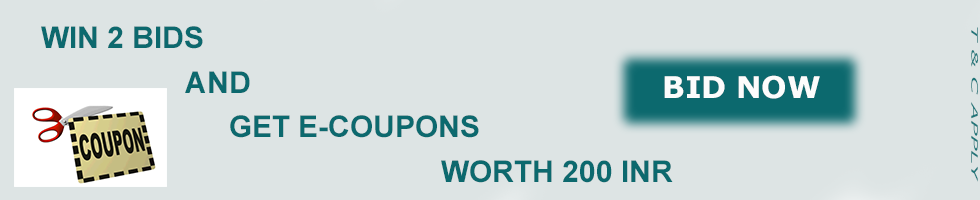
<style>
.page{position:relative;width:980px;height:200px;background:#dde4e4}
.page>*{position:absolute;margin:0}
.t1{font:30px/14.9px "Arial-BoldMT";color:#0c696e}
.t2{font:25.1px/18.7px "Verdana-Italic";color:#21767a;scale:0.36 1}
.t3{font:30px "Verdana-Bold";color:#fcfcfc}
</style>
<div class="page">
<p class="t1" style="left:41px;top:26px;width:632px;height:157px">WIN 2 BIDS <br><br><br>    AND <br><br>  <br>      GET E-COUPONS<br><br> <br>                                                  WORTH 200 INR</p>
<p class="t2" style="left:971px;top:27px;width:7px;height:155px">T &amp; C APPLY</p>
<p class="t3" style="left:664px;top:75px;width:156px;height:24px">BID NOW</p>
</div>
